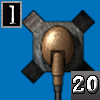
<style>
.page{position:relative;width:100px;height:100px;background:#0072bc}
.page>*{position:absolute;margin:0}
.t1{font:29.2px "Rockwell-Bold"}
.t2{font:25px "Rockwell-Bold"}
</style>
<div class="page">
<p class="t1" style="left:9px;top:5px;width:8px;height:20px">1</p>
<p class="t2" style="left:73px;top:76px;width:25px;height:17px">20</p>
</div>
